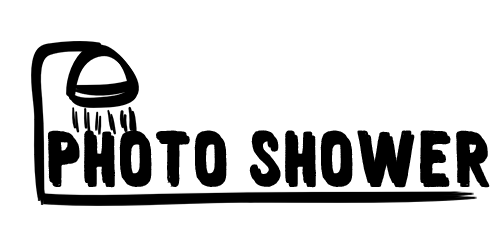
<style>
.page{position:relative;width:500px;height:250px;background:#ffffff}
.page>*{position:absolute;margin:0}
.t1{font:75px "Whitewood";color:#000000}
</style>
<div class="page">
<p class="t1" style="left:47px;top:130px;width:177px;height:54px">photo</p>
<p class="t1" style="left:249px;top:130px;width:238px;height:54px">Shower</p>
</div>
